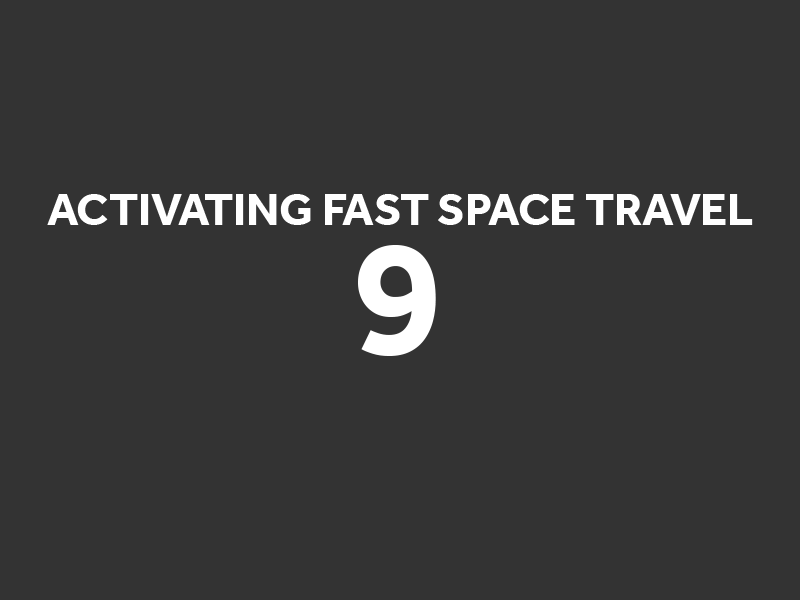
<style>
.page{position:relative;width:800px;height:600px;background:#333333}
.page>*{position:absolute;margin:0}
.t1{font:46.5px "Effra-Bold";color:#ffffff}
.t2{font:166.7px "Effra-Bold";color:#ffffff}
</style>
<div class="page">
<p class="t1" style="left:47px;top:194px;width:706px;height:31px">ACTIVATING FAST SPACE TRAVEL</p>
<p class="t2" style="left:358px;top:245px;width:78px;height:111px">9</p>
</div>
